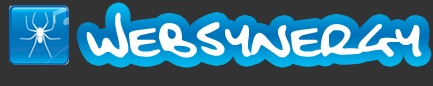
<style>
.page{position:relative;width:433px;height:86px;background:#333333}
.page>*{position:absolute;margin:0}
.t1{font:48px "FatboySlimBLTCBRK)";color:#ffffff}
</style>
<div class="page">
<p class="t1" style="left:86px;top:12px;width:336px;height:46px">WebSynergy</p>
</div>
